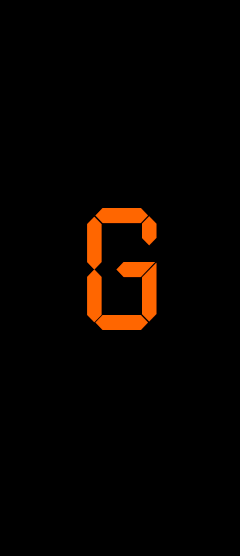
<style>
.page{position:relative;width:240px;height:556px;background:#000000}
.page>*{position:absolute;margin:0}
.t1{font:163.2px "a_LCDNova";color:#ff6600}
</style>
<div class="page">
<p class="t1" style="left:87px;top:208px;width:70px;height:122px">G</p>
</div>
